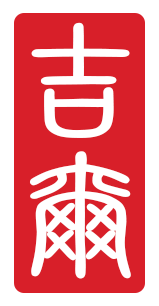
<style>
.page{position:relative;width:159px;height:306px;background:#d81f29}
.page>*{position:absolute;margin:0}
.t1{font:133.1px/132.6px "HYj1gf";color:#ffffff;font-weight:bold;scale:1.45 1}
</style>
<div class="page">
<p class="t1" style="left:29px;top:22px;width:102px;height:257px">吉<br>尔</p>
</div>
